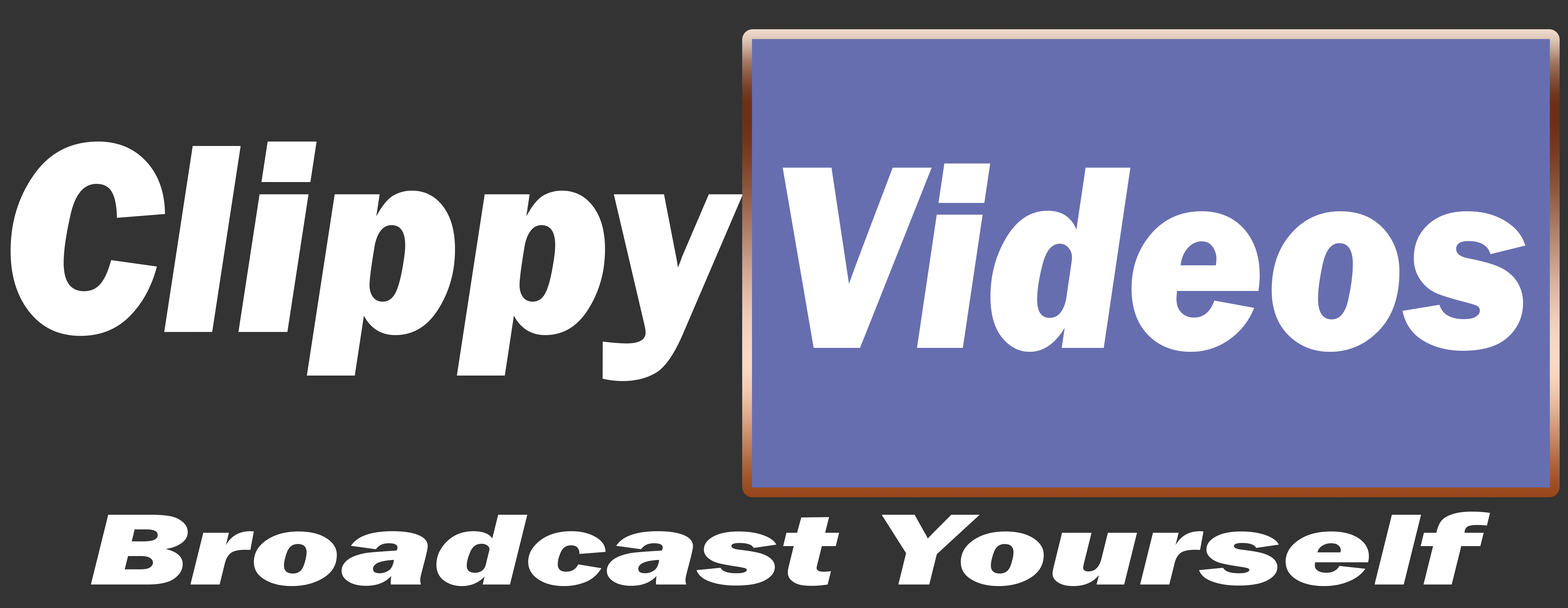
<style>
.page{position:relative;width:1568px;height:608px;background:#333333}
.page>*{position:absolute;margin:0}
.t1{font:279.1px "FranklinGothic-HeavyItalic";color:#ffffff;scale:0.92 1}
.t2{font:270.4px "FranklinGothic-HeavyItalic";color:#ffffff;scale:0.89 1}
.t3{font:104.8px "FranklinGothic-HeavyItalic";color:#ffffff;scale:1.48 1}
</style>
<div class="page">
<p class="t1" style="left:10px;top:141px;width:733px;height:240px">Clippy</p>
<p class="t2" style="left:783px;top:163px;width:742px;height:189px">Videos</p>
<p class="t3" style="left:91px;top:512px;width:1399px;height:74px">Broadcast Yourself</p>
</div>
